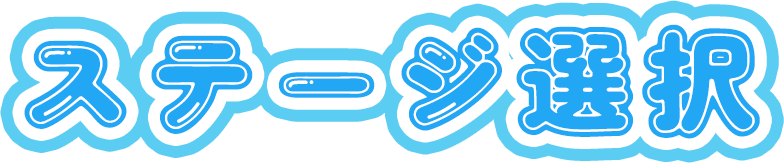
<style>
.page{position:relative;width:784px;height:164px;background:#ffffff}
.page>*{position:absolute;margin:0}
.t1{font:125px "DokiDokiFantasia";color:#21a7f4}
</style>
<div class="page">
<p class="t1" style="left:24px;top:24px;width:736px;height:115px">ステージ選択</p>
</div>
